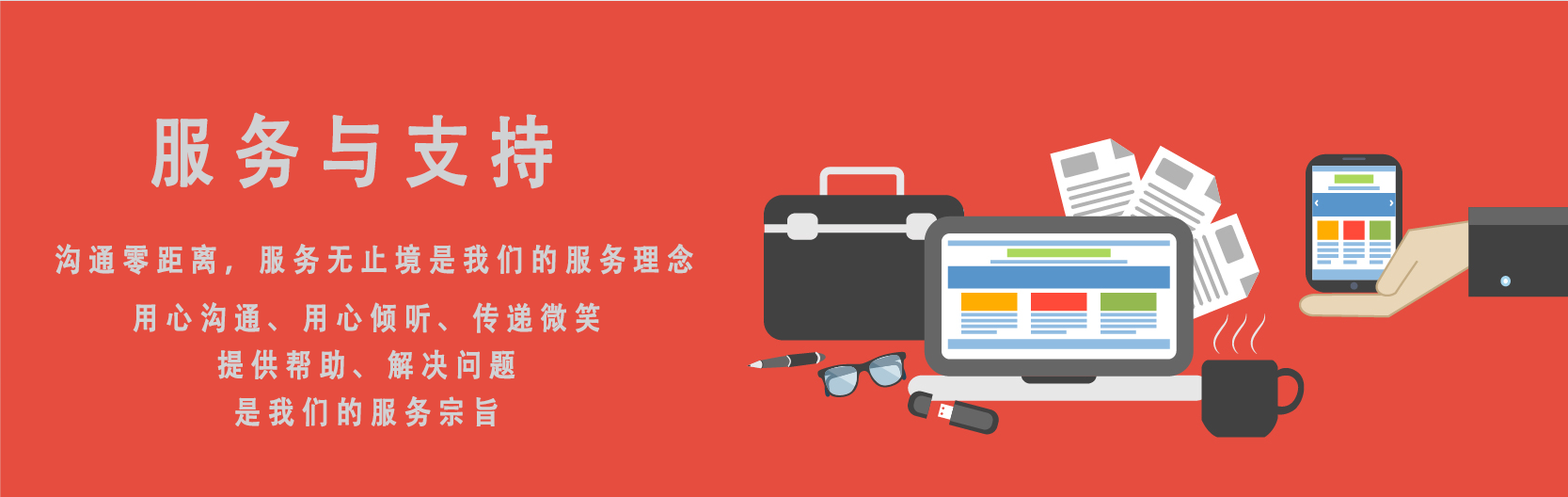
<style>
.page{position:relative;width:1568px;height:497px;background:#e64d3f}
.page>*{position:absolute;margin:0}
.t1{font:78.4px "AdobeHeitiStd-Regular";letter-spacing:0.25em;color:#d0d2d4;text-transform:uppercase;font-weight:bold;scale:0.85 1}
.t2{font:31.4px "AdobeHeitiStd-Regular";letter-spacing:0.25em;color:#d0d2d4;text-transform:uppercase;font-weight:bold;scale:0.85 1}
.t3{font:31.4px/47px "AdobeHeitiStd-Regular";letter-spacing:0.25em;color:#d0d2d4;text-transform:uppercase;font-weight:bold;scale:0.85 1}
</style>
<div class="page">
<p class="t1" style="left:150px;top:112px;width:402px;height:77px">服务与支持</p>
<p class="t2" style="left:55px;top:244px;width:638px;height:31px">沟通零距离，服务无止境是我们的服务理念</p>
<p class="t3" style="left:133px;top:302px;width:467px;height:125px;text-align:center">用心沟通、用心倾听、传递微笑<br>提供帮助、解决问题<br>是我们的服务宗旨</p>
</div>
